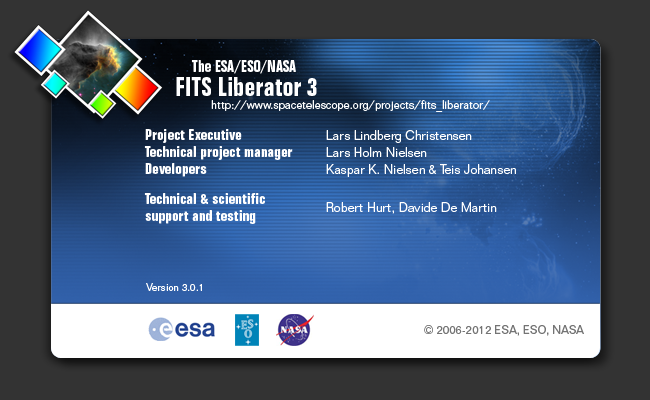
<style>
.page{position:relative;width:650px;height:400px;background:#333333}
.page>*{position:absolute;margin:0}
.t1{font:15.6px "FolioBT-BoldCondensed";color:#ffffff}
.t2{font:25.5px "FolioBT-BoldCondensed";color:#ffffff}
.t3{font:11.3px "FolioBT-Light";color:#ffffff}
.t4{font:14.2px "FolioBT-BoldCondensed";color:#ffffff;scale:1.1 1}
.t5{font:12.8px "FolioBT-Light";color:#ffffff}
.t6{font:9.9px "FolioBT-Book";color:#ffffff}
.t7{font:11.3px "FolioBT-Book";color:#747474}
</style>
<div class="page">
<p class="t1" style="left:191px;top:60px;width:105px;height:14px">The ESA/ESO/NASA</p>
<p class="t2" style="left:176px;top:77px;width:141px;height:19px">FITS Liberator 3</p>
<p class="t3" style="left:211px;top:100px;width:279px;height:12px">http://www.spacetelescope.org/projects/fits_liberator/</p>
<p class="t4" style="left:145px;top:129px;width:97px;height:14px">Project Executive</p>
<p class="t5" style="left:326px;top:130px;width:146px;height:13px">Lars Lindberg Christensen</p>
<p class="t4" style="left:144px;top:146px;width:149px;height:14px">Technical project manager</p>
<p class="t5" style="left:326px;top:147px;width:101px;height:10px">Lars Holm Nielsen</p>
<p class="t4" style="left:145px;top:163px;width:62px;height:14px">Developers</p>
<p class="t5" style="left:326px;top:164px;width:190px;height:13px">Kaspar K. Nielsen &amp; Teis Johansen</p>
<p class="t4" style="left:144px;top:193px;width:121px;height:31px">Technical &amp; scientific<br>support and testing</p>
<p class="t5" style="left:326px;top:202px;width:171px;height:12px">Robert Hurt, Davide De Martin</p>
<p class="t6" style="left:146px;top:283px;width:56px;height:8px">Version 3.0.1</p>
<p class="t7" style="left:424px;top:325px;width:160px;height:11px">© 2006-2012 ESA, ESO, NASA</p>
</div>
